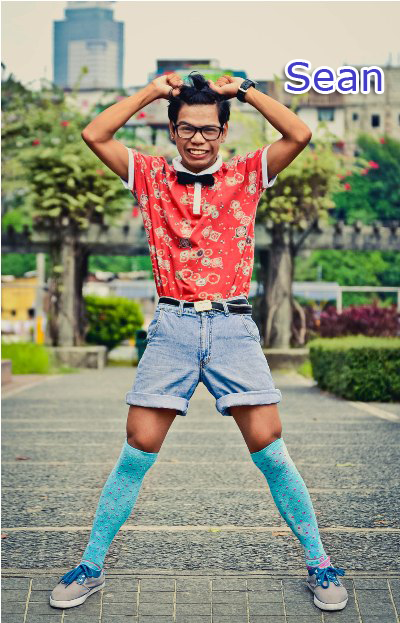
<style>
.page{position:relative;width:400px;height:623px}
.page>*{position:absolute;margin:0}
.t1{font:39.4px "Verdana";color:#443dc5}
</style>
<div class="page">
<p class="t1" style="left:287px;top:62px;width:95px;height:29px">Sean</p>
</div>
